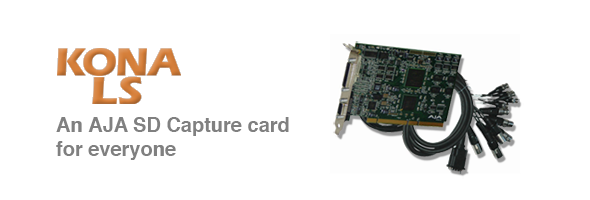
<style>
.page{position:relative;width:590px;height:200px;background:#ffffff}
.page>*{position:absolute;margin:0}
.t1{font:20px "Helvetica-Bold";color:#808080}
</style>
<div class="page">
<p class="t1" style="left:56px;top:117px;width:233px;height:43px">An AJA SD Capture card<br>for everyone</p>
</div>
